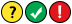
<style>
.page{position:relative;width:72px;height:24px;background:#ffffff}
.page>*{position:absolute;margin:0}
.t1{font:16.6px "MyriadPro-Regular";color:#000000;font-weight:bold;scale:1.12 1}
.t2{font:17.5px "MyriadPro-Regular";color:#fff5f5;font-weight:bold;scale:1.15 1}
</style>
<div class="page">
<p class="t1" style="left:9px;top:6px;width:7px;height:13px">?</p>
<p class="t2" style="left:58px;top:5px;width:4px;height:14px">!</p>
</div>
